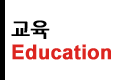
<style>
.page{position:relative;width:130px;height:80px;background:#ffffff}
.page>*{position:absolute;margin:0}
.t1{font:20px/24px "Arial-BoldMT";color:#dc241f;font-weight:bold}
.t2{font:20px/24px "NanumGothicBold";color:#000000;font-weight:bold}
</style>
<div class="page">
<p class="t1" style="left:11px;top:20px;width:100px;height:40px"><span class="t2">교육<br></span>Education</p>
</div>
